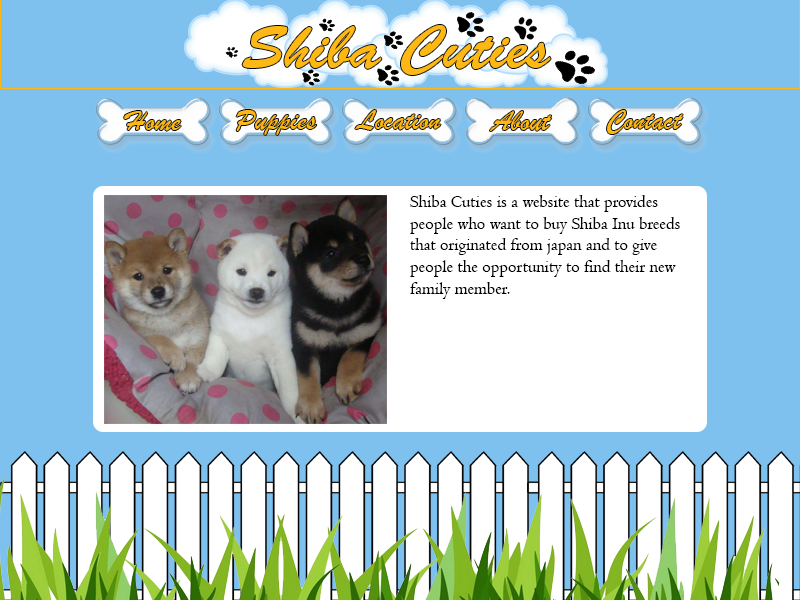
<style>
.page{position:relative;width:800px;height:600px;background:#7ec0ee}
.page>*{position:absolute;margin:0}
.t1{font:60px "BrushScriptStd";color:#fdb813}
.t2{font:30px "BrushScriptMT";color:#fdb813}
.t3{font:18px "Centaur";color:#000000}
</style>
<div class="page">
<p class="t1" style="left:242px;top:25px;width:309px;height:50px">Shiba Cuties</p>
<p class="t2" style="left:124px;top:111px;width:57px;height:20px">Home</p>
<p class="t2" style="left:236px;top:110px;width:81px;height:25px">Puppies</p>
<p class="t2" style="left:355px;top:110px;width:86px;height:20px">Location</p>
<p class="t2" style="left:490px;top:111px;width:62px;height:20px">About</p>
<p class="t2" style="left:607px;top:110px;width:76px;height:24px">Contact</p>
<p class="t3" style="left:410px;top:195px;width:270px;height:104px">Shiba Cuties is a website that provides people who want to buy Shiba Inu breeds that originated from japan and to give people the opportunity to find their new family member.</p>
</div>
